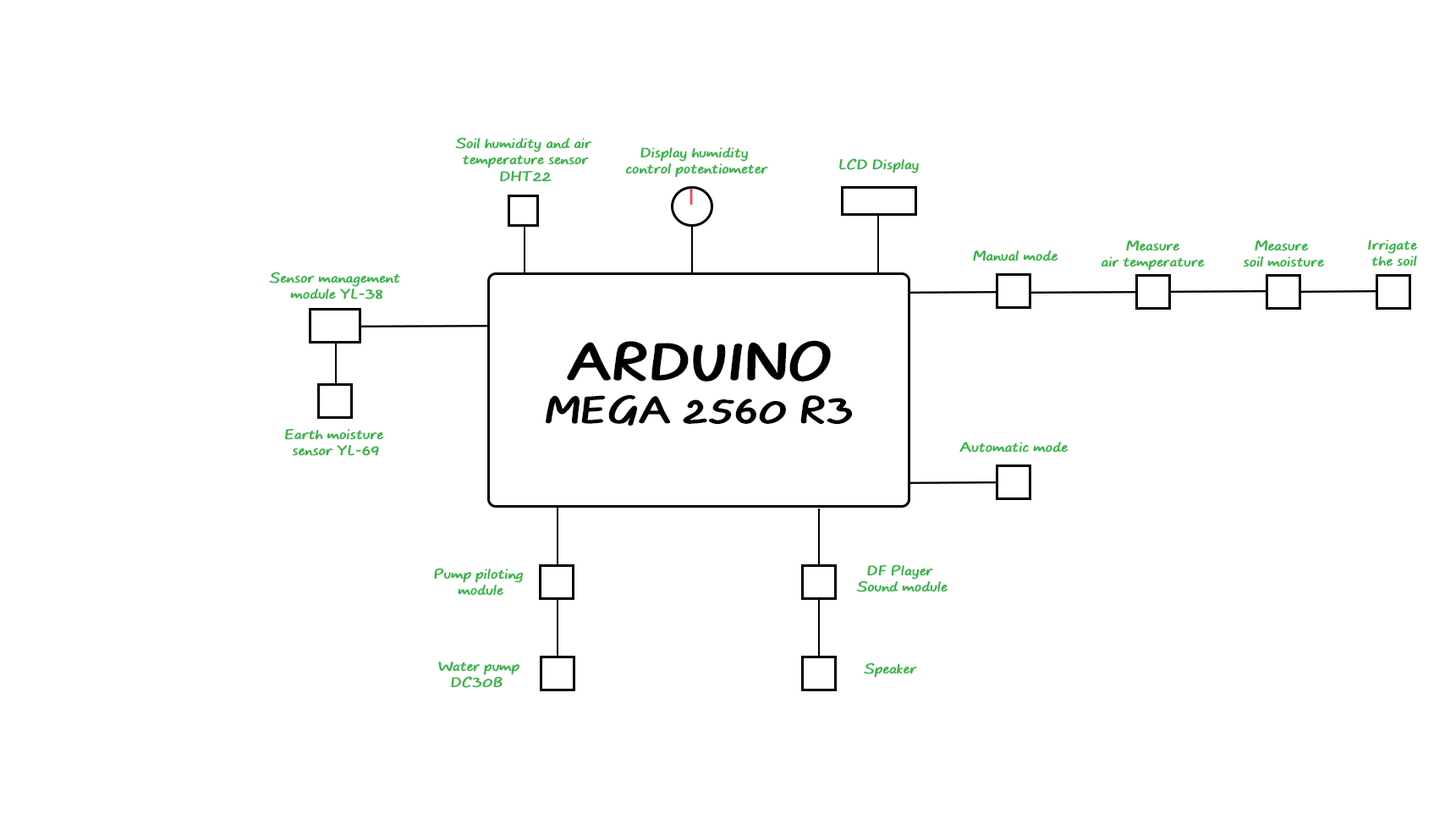
<style>
.page{position:relative;width:1456px;height:819px;background:#ffffff}
.page>*{position:absolute;margin:0}
.t1{font:13.5px "TYPOCOMICSBoldDEMO";letter-spacing:0.02em;color:#39b54a;scale:1.04 1}
.t2{font:36.4px "TYPOCOMICSBoldDEMO";letter-spacing:0.02em;color:#000000;scale:1.04 1}
.t3{font:50.8px "TYPOCOMICSBoldDEMO";letter-spacing:0.02em;color:#000000;scale:1.04 1}
</style>
<div class="page">
<p class="t1" style="left:455px;top:137px;width:137px;height:45px;text-align:center">Soil humidity and air <br>temperature sensor<br>DHT22</p>
<p class="t1" style="left:625px;top:147px;width:143px;height:31px;text-align:center">Display humidity <br>control potentiometer</p>
<p class="t1" style="left:839px;top:158px;width:80px;height:15px">LCD Display</p>
<p class="t1" style="left:1102px;top:240px;width:103px;height:31px;text-align:center">Measure <br>air temperature</p>
<p class="t1" style="left:1244px;top:240px;width:80px;height:27px;text-align:center">Measure <br>soil moisture</p>
<p class="t1" style="left:1368px;top:239px;width:49px;height:28px;text-align:center">Irrigate <br>the soil</p>
<p class="t1" style="left:973px;top:250px;width:85px;height:11px">Manual mode</p>
<p class="t1" style="left:269px;top:272px;width:131px;height:27px;text-align:center">Sensor management <br>module YL-38</p>
<p class="t2" style="left:546px;top:340px;width:307px;height:86px;text-align:center"><span class="t3">ARDUINO<br></span>MEGA 2560 R3</p>
<p class="t1" style="left:284px;top:429px;width:100px;height:27px;text-align:center">Earth moisture <br>sensor YL-69</p>
<p class="t1" style="left:959px;top:442px;width:110px;height:11px">Automatic mode</p>
<p class="t1" style="left:434px;top:568px;width:89px;height:28px;text-align:center">Pump piloting <br>module</p>
<p class="t1" style="left:856px;top:564px;width:92px;height:28px;text-align:center">DF Player <br>Sound module</p>
<p class="t1" style="left:438px;top:662px;width:81px;height:26px;text-align:center">Water pump<br>DC30B</p>
<p class="t1" style="left:864px;top:662px;width:53px;height:16px">Speaker</p>
</div>
